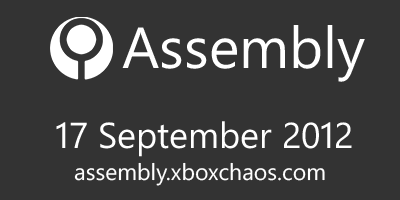
<style>
.page{position:relative;width:400px;height:200px;background:#333333}
.page>*{position:absolute;margin:0}
.t1{font:58px "SegoeWP";color:#ffffff}
.t2{font:36px "SegoeWP";color:#ffffff}
.t3{font:23px "SegoeWP";color:#ffffff}
</style>
<div class="page">
<p class="t1" style="left:122px;top:25px;width:243px;height:57px">Assembly</p>
<p class="t2" style="left:56px;top:121px;width:296px;height:36px">17 September 2012</p>
<p class="t3" style="left:74px;top:162px;width:251px;height:24px">assembly.xboxchaos.com</p>
</div>
